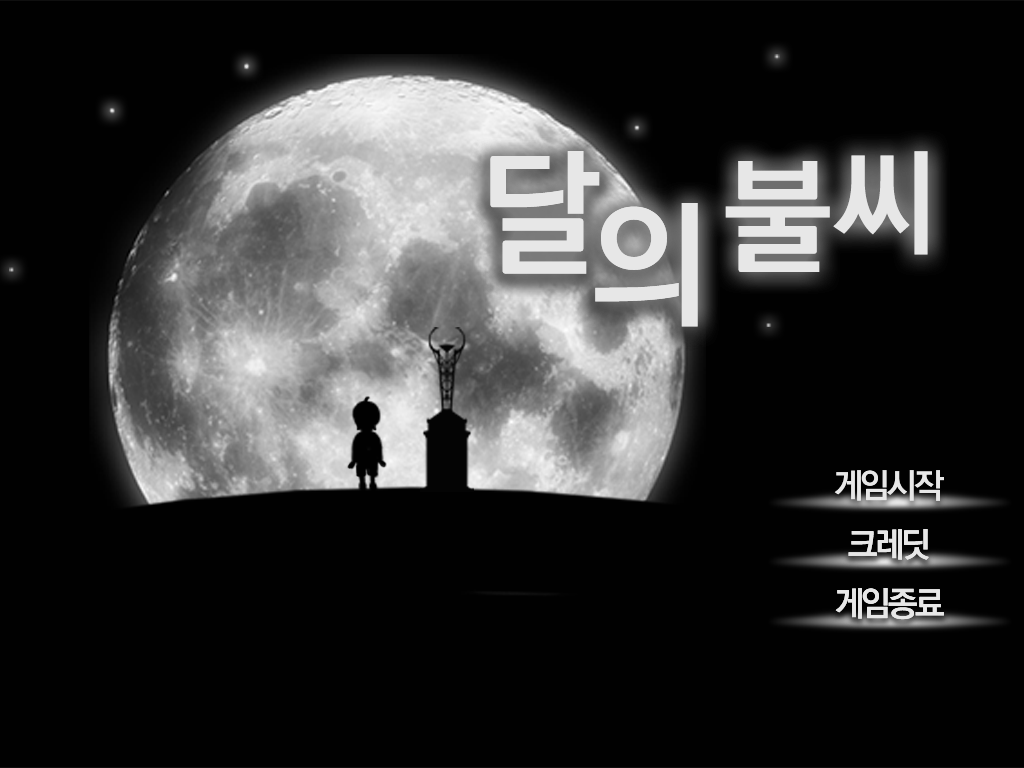
<style>
.page{position:relative;width:1024px;height:768px;background:#010101}
.page>*{position:absolute;margin:0}
.t1{font:137.6px "KoPubDotumBold";letter-spacing:-0.09em;color:#e7e7e7}
.t2{font:124.6px "KoPubDotumBold";letter-spacing:0.01em;color:#e7e7e7}
.t3{font:114.8px "KoPubDotumBold";letter-spacing:0.01em;color:#e7e7e7}
.t4{font:34.3px "KoPubDotumBold";letter-spacing:-0.09em;color:#e7e7e7}
</style>
<div class="page">
<p class="t1" style="left:490px;top:151px;width:438px;height:176px">달의 <span class="t2">불</span><span class="t3">씨</span></p>
<p class="t4" style="left:834px;top:470px;width:110px;height:31px">게임시작</p>
<p class="t4" style="left:848px;top:529px;width:81px;height:31px">크레딧</p>
<p class="t4" style="left:835px;top:588px;width:109px;height:32px">게임종료</p>
</div>
